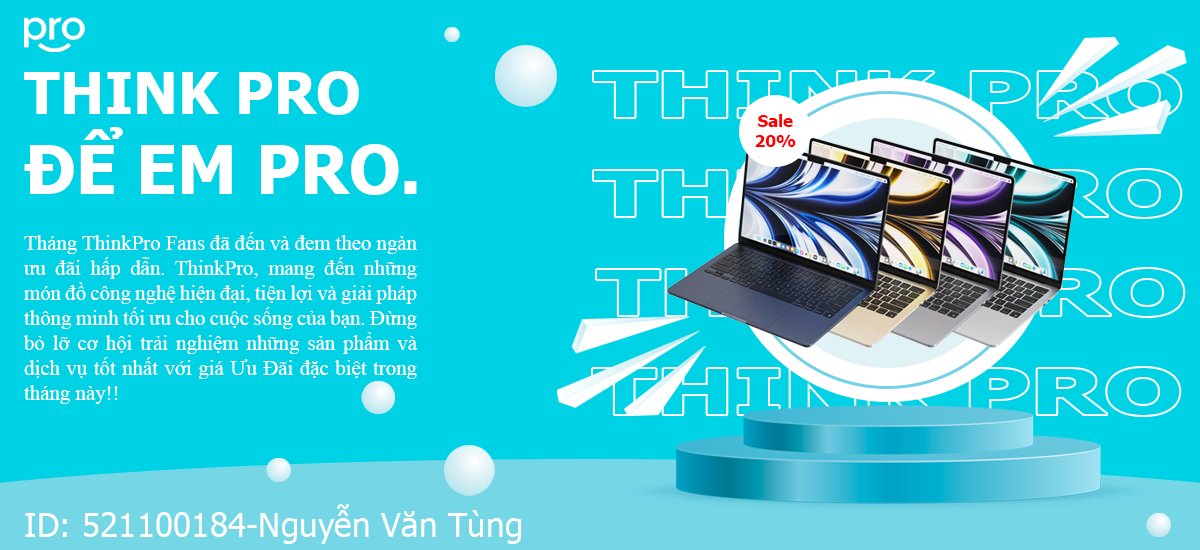
<style>
.page{position:relative;width:1200px;height:550px;background:#00d2e5}
.page>*{position:absolute;margin:0}
.t1{font:66.7px "Tahoma-Bold";color:#ffffff}
.t2{font:58.3px "Tahoma-Bold";color:#ffffff}
.t3{font:16.7px "Tahoma-Bold";color:#ff0000}
.t4{font:20.8px "TimesNewRomanPSMT";color:#ffffff}
.t5{font:33.5px "Tahoma";color:#ffffff}
</style>
<div class="page">
<p class="t1" style="left:24px;top:71px;width:393px;height:124px"><span class="t2">THINK PRO<br></span>ĐỂ EM PRO.</p>
<p class="t3" style="left:755px;top:114px;width:41px;height:33px;text-align:center">Sale<br>20%</p>
<p class="t4" style="left:24px;top:232px;width:394px;height:172px;text-align:justify">Tháng ThinkPro Fans đã đến và đem theo ngàn ưu đãi hấp dẫn. ThinkPro, mang đến những món đồ công nghệ hiện đại, tiện lợi và giải pháp thông minh tối ưu cho cuộc sống của bạn. Đừng bỏ lỡ cơ hội trải nghiệm những sản phẩm và dịch vụ tốt nhất với giá Ưu Đãi đặc biệt trong tháng này!!</p>
<p class="t5" style="left:25px;top:504px;width:496px;height:40px">ID: 521100184-Nguyễn Văn Tùng</p>
</div>
